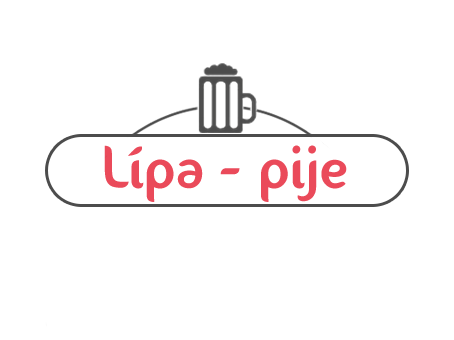
<style>
.page{position:relative;width:454px;height:340px;background:#ffffff}
.page>*{position:absolute;margin:0}
.t1{font:60px "Fontastique-Fontastique";color:#ea4a5a}
.t2{font:60px "Fontastique-Fontastique";color:#484c55}
</style>
<div class="page">
<p class="t1" style="left:104px;top:145px;width:243px;height:57px;text-align:center">Lípa - pije<br><span class="t2">v</span></p>
</div>
